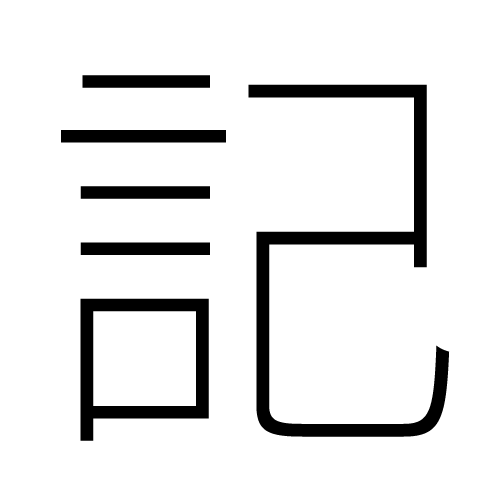
<style>
.page{position:relative;width:500px;height:500px;background:#ffffff}
.page>*{position:absolute;margin:0}
.t1{font:420px "KozGoPr6N-ExtraLight";color:#000000}
.t2{font:380px "HiraMinProN-W3";color:#000000}
</style>
<div class="page">
<p class="t1" style="left:61px;top:75px;width:389px;height:366px">記<span class="t2">号</span></p>
</div>
